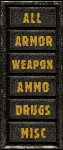
<style>
.page{position:relative;width:63px;height:150px}
.page>*{position:absolute;margin:0}
.t1{font:10px "FalloutDecayed";letter-spacing:0.1em;color:#c39528}
.t2{font:10px "FalloutDecayed";letter-spacing:0.05em;color:#c3952c}
.t3{font:9px "FalloutDecayed";letter-spacing:0.05em;color:#c3952c}
.t4{font:10px "FalloutDecayed";letter-spacing:0.075em;color:#c3952a}
.t5{font:10px "FalloutDecayed";letter-spacing:0.05em;color:#c3952d}
.t6{font:10px "FalloutDecayed";letter-spacing:0.1em;color:#c39527}
</style>
<div class="page">
<p class="t1" style="left:23px;top:13px;width:19px;height:10px">ALL</p>
<p class="t2" style="left:15px;top:36px;width:37px;height:10px">ARMOR</p>
<p class="t3" style="left:12px;top:60px;width:41px;height:9px">Weapon</p>
<p class="t4" style="left:17px;top:82px;width:32px;height:10px">AMMO</p>
<p class="t5" style="left:16px;top:105px;width:35px;height:10px">Drugs</p>
<p class="t6" style="left:21px;top:128px;width:25px;height:10px">MISC</p>
</div>
